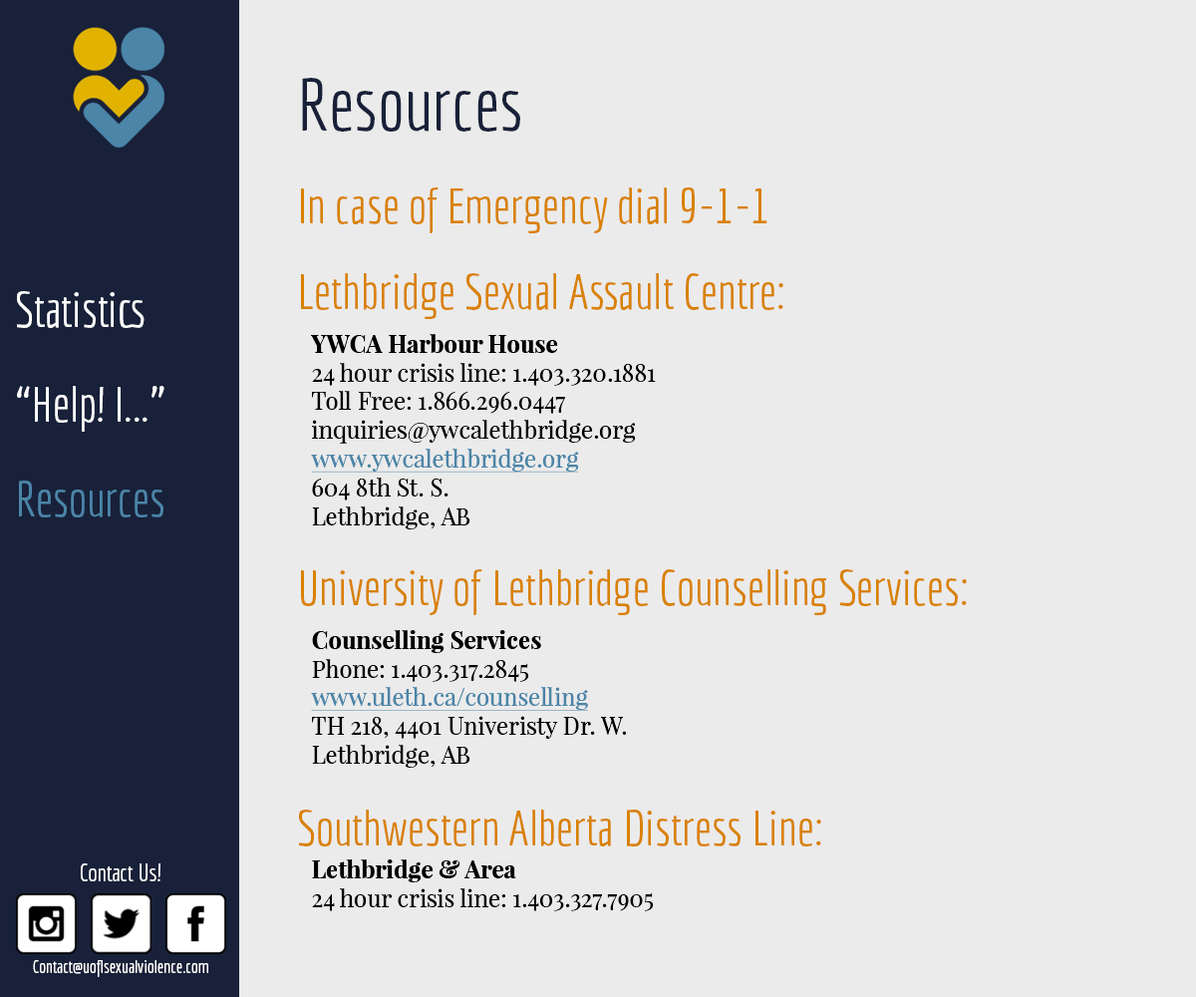
<style>
.page{position:relative;width:1196px;height:997px;background:#ebebeb}
.page>*{position:absolute;margin:0}
.t1{font:71.8px "Economica-Regular";color:#182139}
.t2{font:47.8px "Economica-Regular";color:#d98100}
.t3{font:47.8px/94.7px "Economica-Regular";color:#ffffff}
.t4{font:59.8px/94.7px "Economica-Regular";color:#ffffff}
.t5{font:47.8px/94.7px "Economica-Regular";color:#4b85a8}
.t6{font:23.9px "PlayfairDisplay-Regular";color:#010100}
.t7{font:23.9px "PlayfairDisplay-Bold";color:#010100}
.t8{font:23.9px "PlayfairDisplay-Regular";color:#4b85a8;text-decoration:underline}
.t9{font:23.9px "Economica-Regular";color:#ffffff}
.t10{font:17.9px "Economica-Regular";color:#ffffff}
</style>
<div class="page">
<p class="t1" style="left:302px;top:78px;width:218px;height:54px">Resources</p>
<p class="t2" style="left:301px;top:187px;width:467px;height:46px">In case of Emergency dial 9-1-1</p>
<p class="t2" style="left:301px;top:273px;width:483px;height:46px">Lethbridge Sexual Assault Centre:</p>
<p class="t3" style="left:17px;top:291px;width:147px;height:226px;text-align:center"><span class="t4"><br></span>Statistics<br>“Help! I...”<br><span class="t5">Resources</span></p>
<p class="t6" style="left:311px;top:334px;width:345px;height:195px"><span class="t7">YWCA Harbour House<br></span>24 hour crisis line: 1.403.320.1881<br>Toll Free: 1.866.296.0447<br>inquiries@ywcalethbridge.org<br><span class="t8">www.ywcalethbridge.org<br></span>604 8th St. S.<br>Lethbridge, AB</p>
<p class="t2" style="left:301px;top:569px;width:666px;height:46px">University of Lethbridge Counselling Services:</p>
<p class="t6" style="left:311px;top:630px;width:316px;height:138px"><span class="t7">Counselling Services<br></span>Phone: 1.403.317.2845<br><span class="t8">www.uleth.ca/counselling<br></span>TH 218, 4401 Univeristy Dr. W.<br>Lethbridge, AB</p>
<p class="t2" style="left:299px;top:809px;width:522px;height:37px">Southwestern Alberta Distress Line:</p>
<p class="t9" style="left:81px;top:863px;width:79px;height:18px">Contact Us!</p>
<p class="t6" style="left:312px;top:859px;width:342px;height:52px"><span class="t7">Lethbridge &amp; Area<br></span>24 hour crisis line: 1.403.327.7905</p>
<p class="t10" style="left:33px;top:960px;width:175px;height:17px">Contact@uoflsexualviolence.com</p>
</div>
